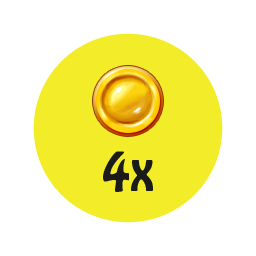
<style>
.page{position:relative;width:256px;height:256px;background:#ffffff}
.page>*{position:absolute;margin:0}
.t1{font:48px "HoboStd";color:#1b1b1b}
</style>
<div class="page">
<p class="t1" style="left:103px;top:151px;width:50px;height:41px">4x</p>
</div>
